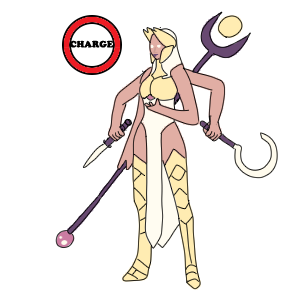
<style>
.page{position:relative;width:300px;height:300px;background:#ffffff}
.page>*{position:absolute;margin:0}
.t1{font:9px "CooperBlackStd";color:#000000}
</style>
<div class="page">
<p class="t1" style="left:70px;top:40px;width:44px;height:8px">CHARGE</p>
</div>
